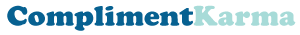
<style>
.page{position:relative;width:300px;height:35px;background:#ffffff}
.page>*{position:absolute;margin:0}
.t1{font:29.2px "CooperBlack";letter-spacing:0.01em;color:#076191}
.t2{font:29.2px "CooperBlack";letter-spacing:0.01em;color:#a7dbd8}
</style>
<div class="page">
<p class="t1" style="left:7px;top:5px;width:289px;height:26px">Compliment<span class="t2">Karma</span></p>
</div>
